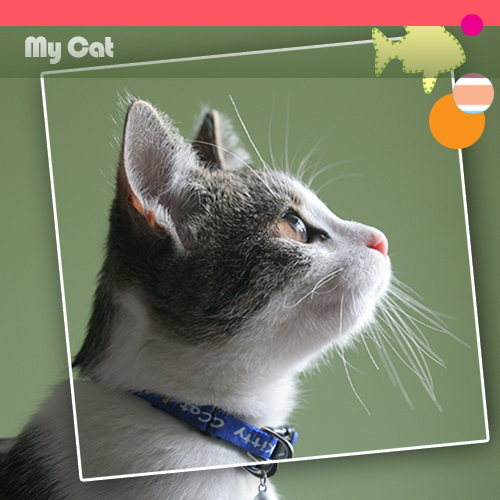
<style>
.page{position:relative;width:500px;height:500px}
.page>*{position:absolute;margin:0}
.t1{font:30px "Bauhaus93";letter-spacing:-0.05em;color:#cdd3c7}
</style>
<div class="page">
<p class="t1" style="left:25px;top:36px;width:89px;height:28px">My Cat</p>
</div>
